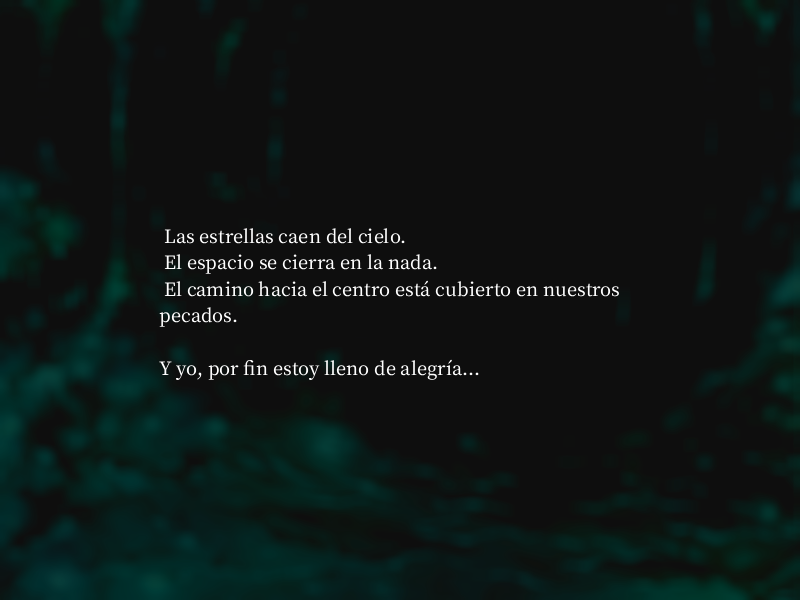
<style>
.page{position:relative;width:800px;height:600px;background:#0e0e0e}
.page>*{position:absolute;margin:0}
.t1{font:22px "OfficialFateFont-Medium";color:#ffffff}
</style>
<div class="page">
<p class="t1" style="left:159px;top:228px;width:460px;height:153px">Las estrellas caen del cielo.<br> El espacio se cierra en la nada.<br> El camino hacia el centro está cubierto en nuestros pecados.<br><br>Y yo, por fin estoy lleno de alegría...</p>
</div>
